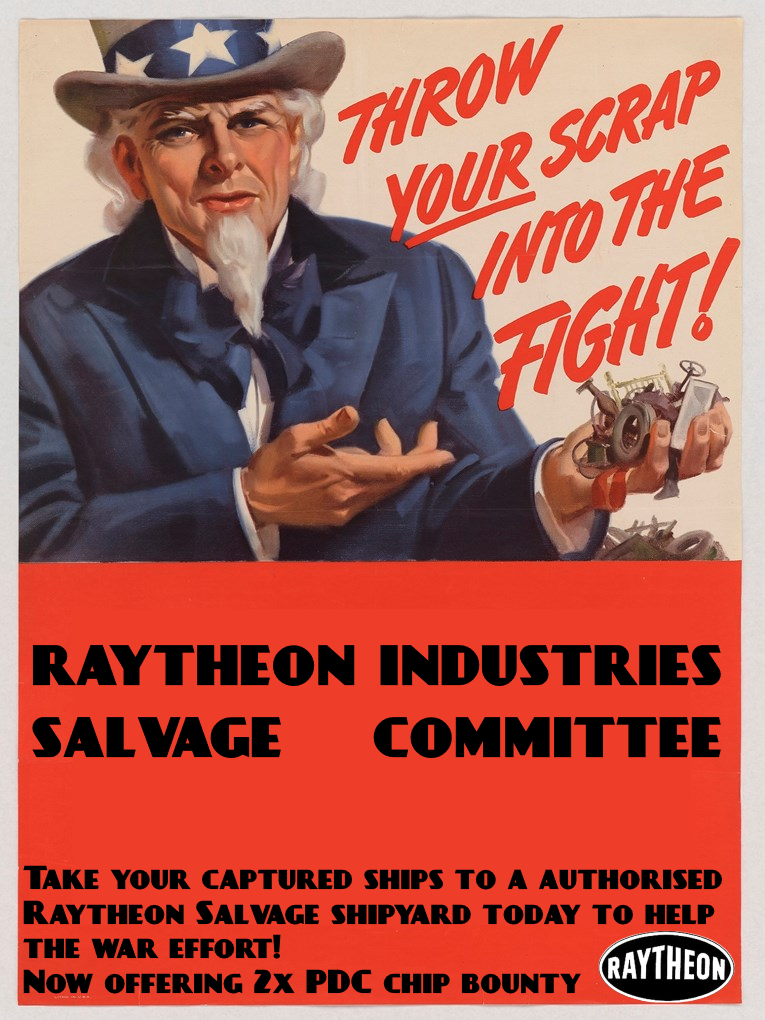
<style>
.page{position:relative;width:765px;height:1020px}
.page>*{position:absolute;margin:0}
.t1{font:60px "DayPosterBlack";color:#000000}
.t2{font:29px "DayPosterBlack";color:#000000}
</style>
<div class="page">
<p class="t1" style="left:32px;top:645px;width:689px;height:114px">raytheon industries <br>salvage    committee</p>
<p class="t2" style="left:23px;top:865px;width:699px;height:129px">Take your captured ships to a authorised <br>Raytheon Salvage shipyard today to help<br>the war effort!<br>Now offering 2x PDC chip bounty</p>
</div>
